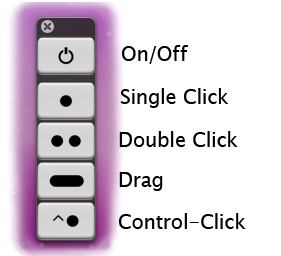
<style>
.page{position:relative;width:281px;height:256px;background:#ffffff}
.page>*{position:absolute;margin:0}
.t1{font:20px "LucidaGrande";color:#000000}
</style>
<div class="page">
<p class="t1" style="left:121px;top:45px;width:67px;height:19px">On/Off</p>
<p class="t1" style="left:120px;top:88px;width:109px;height:20px">Single Click</p>
<p class="t1" style="left:119px;top:131px;width:119px;height:16px">Double Click</p>
<p class="t1" style="left:119px;top:172px;width:44px;height:19px">Drag</p>
<p class="t1" style="left:118px;top:213px;width:128px;height:16px">Control-Click</p>
</div>
